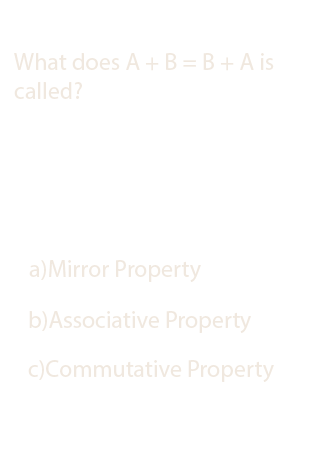
<style>
.page{position:relative;width:320px;height:460px;background:#ffffff}
.page>*{position:absolute;margin:0}
.t1{font:12px "MyriadPro-Regular";color:#f0e8df}
</style>
<div class="page">
<p class="t1" style="left:14px;top:53px;width:260px;height:46px">What does A + B = B + A is called?</p>
<p class="t1" style="left:29px;top:260px;width:172px;height:22px">a)Mirror Property</p>
<p class="t1" style="left:29px;top:311px;width:222px;height:22px">b)Associative Property</p>
<p class="t1" style="left:28px;top:360px;width:246px;height:22px">c)Commutative Property</p>
</div>
